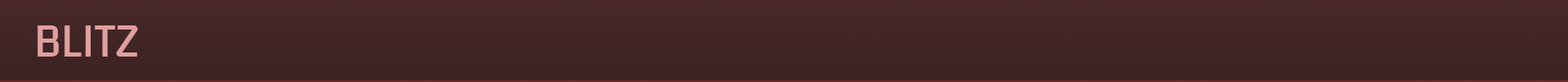
<style>
.page{position:relative;width:1568px;height:82px}
.page>*{position:absolute;margin:0}
.t1{font:39.2px "KdamThmorPro-Regular";color:#e09f9f}
</style>
<div class="page">
<p class="t1" style="left:38px;top:25px;width:100px;height:31px">BLITZ</p>
</div>
